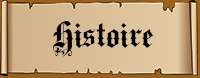
<style>
.page{position:relative;width:200px;height:78px}
.page>*{position:absolute;margin:0}
.t1{font:36.2px "MediciText";color:#000000}
</style>
<div class="page">
<p class="t1" style="left:53px;top:21px;width:101px;height:36px">Histoire</p>
</div>
